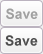
<style>
.page{position:relative;width:43px;height:54px}
.page>*{position:absolute;margin:0}
.t1{font:14px "Arial-BoldMT";color:#a0a0a0}
.t2{font:14px "Arial-BoldMT";color:#4e4e4e}
</style>
<div class="page">
<p class="t1" style="left:5px;top:7px;width:33px;height:17px">Save</p>
<p class="t2" style="left:5px;top:34px;width:33px;height:17px">Save</p>
</div>
